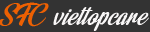
<style>
.page{position:relative;width:150px;height:32px;background:#333333}
.page>*{position:absolute;margin:0}
.t1{font:25px "RainbowBridgePersonalUse";color:#f9f7f7;scale:1.2 1}
.t2{font:26px "RainbowBridgePersonalUse";color:#ed6002;scale:1.2 1}
</style>
<div class="page">
<p class="t1" style="left:0px;top:2px;width:149px;height:29px"><span class="t2">SFC </span>viettopcare</p>
</div>
